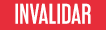
<style>
.page{position:relative;width:106px;height:30px;background:#e72d3a}
.page>*{position:absolute;margin:0}
.t1{font:25px "LibelSuitRg-Regular";letter-spacing:0.01em;color:#ffffff}
</style>
<div class="page">
<p class="t1" style="left:15px;top:3px;width:76px;height:21px">INVALIDAR</p>
</div>
